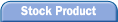
<style>
.page{position:relative;width:118px;height:22px;background:#8ea9dd}
.page>*{position:absolute;margin:0}
.t1{font:13px "FranklinGothic-DemiItal";color:#ffffff;scale:0.9 1}
</style>
<div class="page">
<p class="t1" style="left:21px;top:6px;width:75px;height:10px">Stock Product</p>
<p class="t1" style="left:21px;top:6px;width:75px;height:10px;opacity:0.5">Stock Product</p>
</div>
